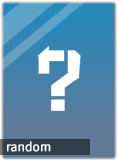
<style>
.page{position:relative;width:118px;height:161px}
.page>*{position:absolute;margin:0}
.t1{font:12px "NotoSansCJKkr-Regular";letter-spacing:-0.01em;color:#ffffff;font-weight:bold}
</style>
<div class="page">
<p class="t1" style="left:7px;top:141px;width:44px;height:11px">random</p>
</div>
